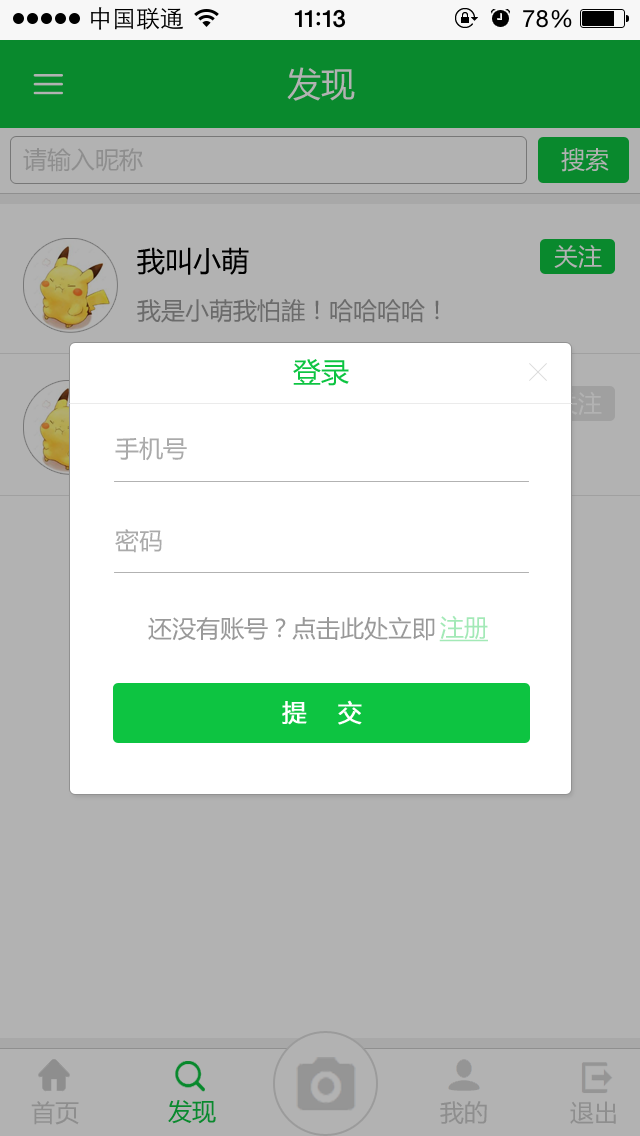
<style>
.page{position:relative;width:640px;height:1136px;background:#b2b2b2}
.page>*{position:absolute;margin:0}
.t1{font:34px "MicrosoftYaHei";color:#b2b2b2}
.t2{font:24px "MicrosoftYaHei";color:#8e8e8e}
.t3{font:24px "MicrosoftYaHei";color:#b2b2b2}
.t4{font:28px "MicrosoftYaHei";color:#000000}
.t5{font:24px "MicrosoftYaHei";color:#6b6b6b}
.t6{font:28px "MicrosoftYaHei";color:#0dc441}
.t7{font:24px "MicrosoftYaHei";color:#aaaaaa}
.t8{font:24px "MicrosoftYaHei";color:#999999}
.t9{font:24px "MicrosoftYaHei";color:#a3e9b7;text-decoration:underline}
.t10{font:24px "MicrosoftYaHei";color:#ffffff;font-weight:bold}
.t11{font:24px "MicrosoftYaHei";color:#09892d}
</style>
<div class="page">
<p class="t1" style="left:287px;top:67px;width:68px;height:34px">发现</p>
<p class="t2" style="left:23px;top:148px;width:120px;height:24px">请输入昵称</p>
<p class="t3" style="left:561px;top:148px;width:48px;height:24px">搜索</p>
<p class="t3" style="left:554px;top:244px;width:48px;height:24px">关注</p>
<p class="t4" style="left:137px;top:247px;width:112px;height:28px">我叫小萌</p>
<p class="t5" style="left:137px;top:299px;width:302px;height:24px">我是小萌我怕誰！哈哈哈哈！</p>
<p class="t6" style="left:293px;top:359px;width:56px;height:27px">登录</p>
<p class="t7" style="left:115px;top:437px;width:72px;height:24px">手机号</p>
<p class="t7" style="left:115px;top:529px;width:47px;height:24px">密码</p>
<p class="t8" style="left:148px;top:616px;width:287px;height:25px">还没有账号？点击此处立即</p>
<p class="t9" style="left:439px;top:615px;width:49px;height:27px">注册</p>
<p class="t10" style="left:282px;top:700px;width:80px;height:25px">提    交</p>
<p class="t2" style="left:31px;top:1101px;width:48px;height:24px">首页</p>
<p class="t11" style="left:168px;top:1100px;width:48px;height:24px">发现</p>
<p class="t2" style="left:440px;top:1101px;width:47px;height:23px">我的</p>
<p class="t2" style="left:570px;top:1101px;width:46px;height:23px">退出</p>
</div>
